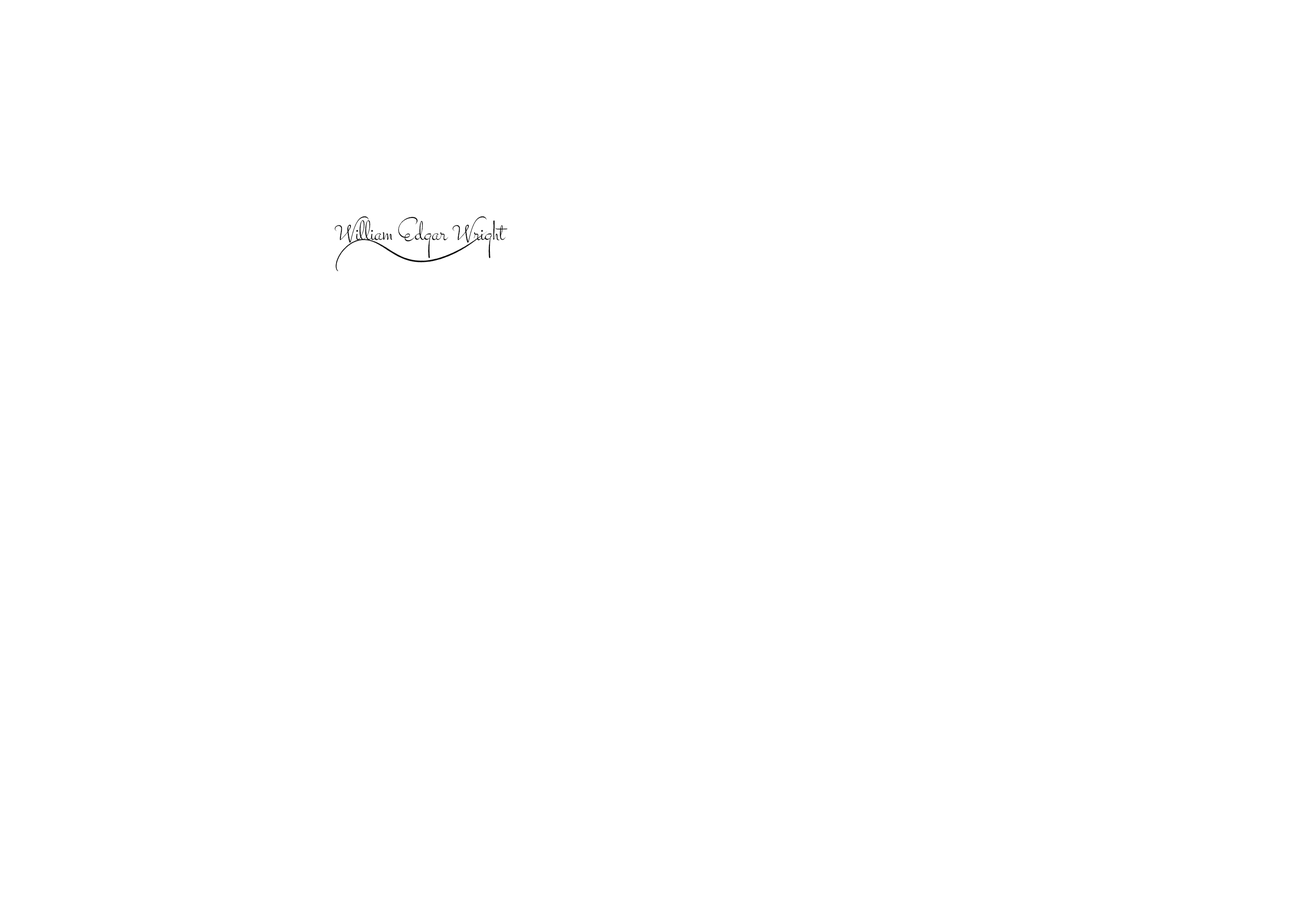
<style>
.page{position:relative;width:1290px;height:924px;background:#ffffff}
.page>*{position:absolute;margin:0}
.t1{font:31.6px "Stalemate-Regular";color:#000000}
</style>
<div class="page">
<p class="t1" style="left:335px;top:216px;width:173px;height:42px">William Edgar Wright</p>
</div>
